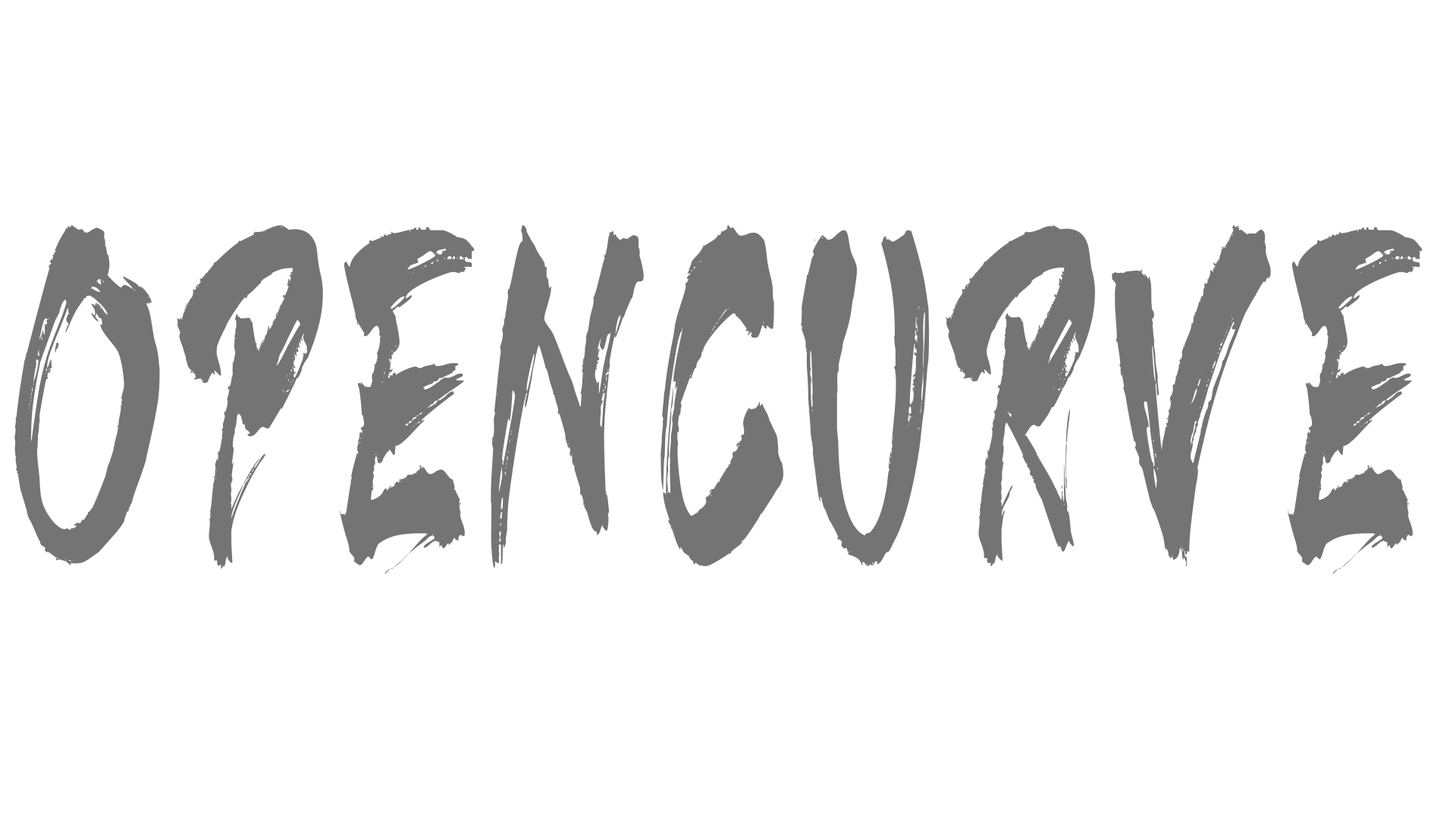
<style>
.page{position:relative;width:1456px;height:819px;background:#ffffff}
.page>*{position:absolute;margin:0}
.t1{font:497.7px "zihun138hao-baranshoushu";color:#747474;scale:0.49 1}
</style>
<div class="page">
<p class="t1" style="left:14px;top:225px;width:1409px;height:349px">OPENCURVE</p>
</div>
